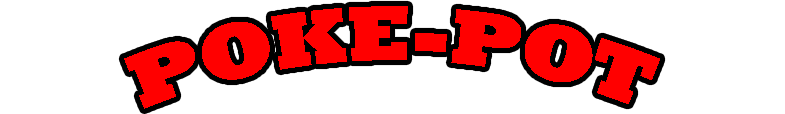
<style>
.page{position:relative;width:785px;height:114px;background:#ffffff}
.page>*{position:absolute;margin:0}
.t1{font:79.2px "Rockwell-ExtraBold";color:#ff0000}
</style>
<div class="page">
<p class="t1" style="left:124px;top:6px;width:536px;height:103px">POKE-POT</p>
</div>
